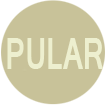
<style>
.page{position:relative;width:105px;height:105px;background:#c8c299}
.page>*{position:absolute;margin:0}
.t1{font:42.4px "Mangal-Bold";color:#edefcf;scale:0.65 1}
</style>
<div class="page">
<p class="t1" style="left:7px;top:38px;width:96px;height:31px">PULAR</p>
</div>
